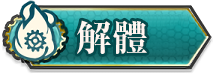
<style>
.page{position:relative;width:213px;height:75px}
.page>*{position:absolute;margin:0}
.t1{font:36px "RyuminPr6N-ExBold";color:#fff6f1}
</style>
<div class="page">
<p class="t1" style="left:77px;top:20px;width:70px;height:34px">解體</p>
</div>
